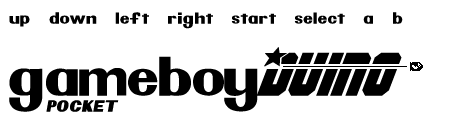
<style>
.page{position:relative;width:450px;height:130px;background:#ffffff}
.page>*{position:absolute;margin:0}
.t1{font:14px "Pretendo";letter-spacing:0.05em;color:#000000}
.t2{font:48px "Pretendo";color:#000000}
.t3{font:48px "Pretendo";letter-spacing:-0.2em;color:#000000}
.t4{font:60px "ArmyRangersLaserItalic";color:#000000}
.t5{font:24px/24px "Pretendo";letter-spacing:0.05em;color:#000000;text-transform:uppercase;font-weight:bold;font-style:italic}
</style>
<div class="page">
<p class="t1" style="left:9px;top:12px;width:394px;height:100px">up     down     left     right     start     select     a     b<br><span class="t2">gamebo</span><span class="t3">y</span><span class="t4">Duino<br>      </span><span class="t5">POCKET</span></p>
</div>
